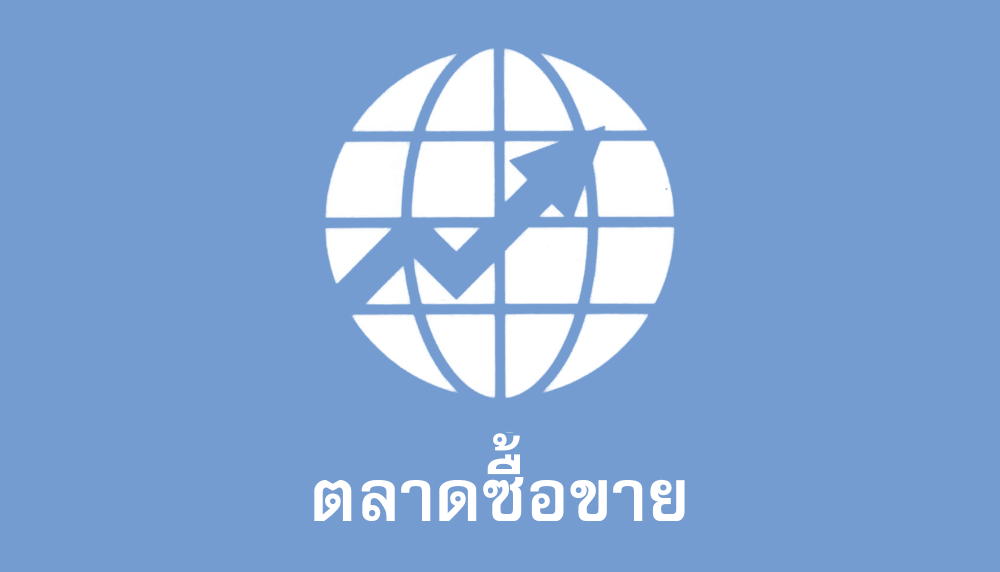
<style>
.page{position:relative;width:1000px;height:572px;background:#749cd0}
.page>*{position:absolute;margin:0}
.t1{font:102px "FreesiaUPCBold";color:#ffffff}
</style>
<div class="page">
<p class="t1" style="left:314px;top:433px;width:371px;height:88px">ตลาดซื้อขาย</p>
</div>
